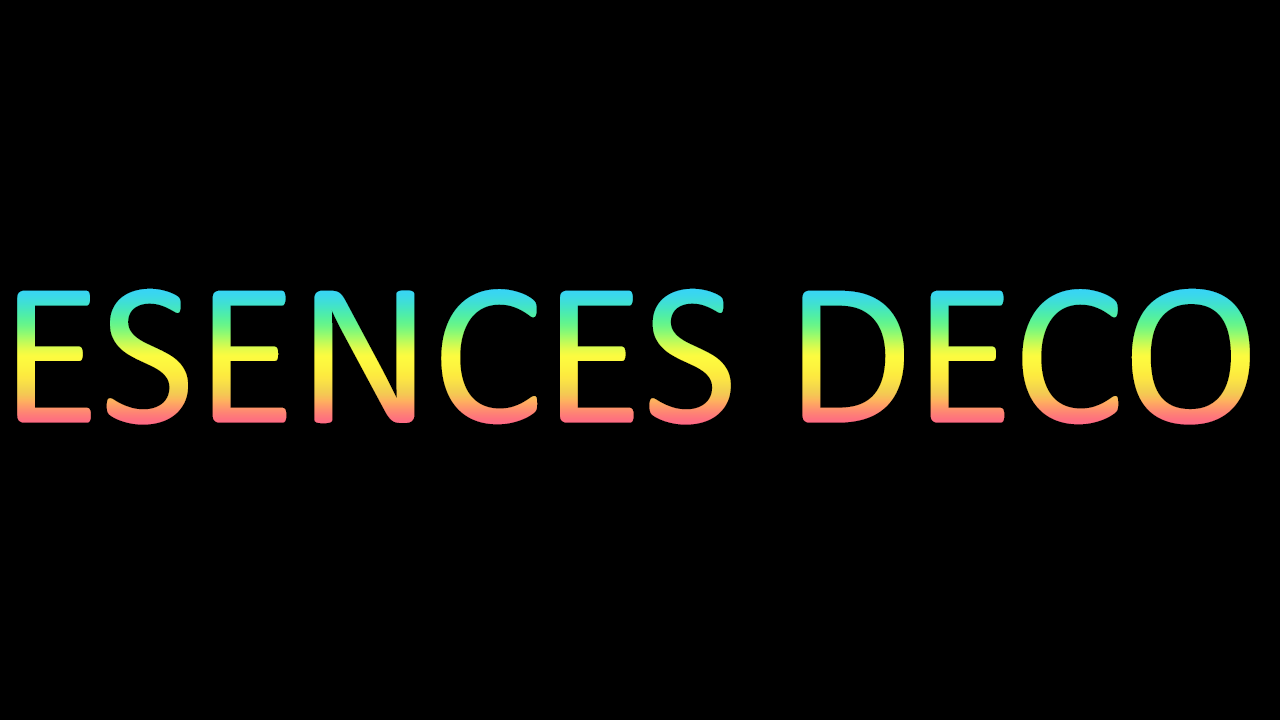
<style>
.page{position:relative;width:1280px;height:720px;background:#000000}
.page>*{position:absolute;margin:0}
.t1{font:208.3px "Calibri"}
</style>
<div class="page">
<p class="t1" style="left:17px;top:288px;width:1233px;height:137px">ESENCES DECO</p>
</div>
